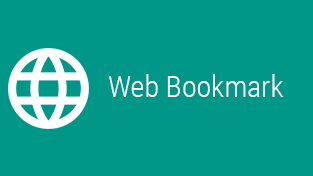
<style>
.page{position:relative;width:313px;height:176px;background:#009688}
.page>*{position:absolute;margin:0}
.t1{font:30px "RobotoCondensed-Light";color:#ffffff}
</style>
<div class="page">
<p class="t1" style="left:109px;top:74px;width:175px;height:23px">Web Bookmark</p>
</div>
